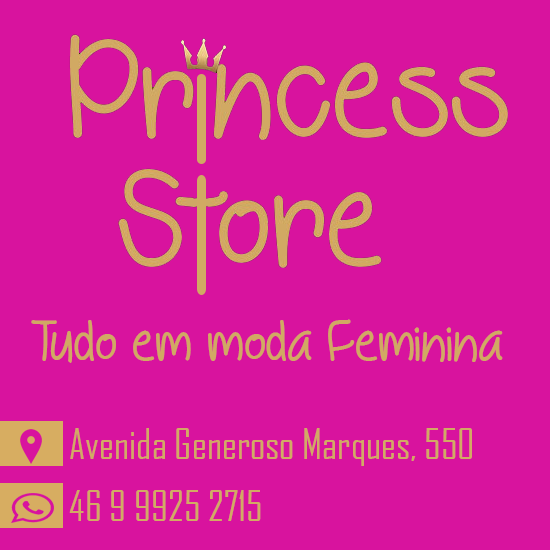
<style>
.page{position:relative;width:550px;height:550px;background:#d8139e}
.page>*{position:absolute;margin:0}
.t1{font:60px "BehindBlueEyes";color:#d1a963}
.t2{font:40px "AgencyFB-Reg";color:#d2aa64}
</style>
<div class="page">
<p class="t1" style="left:31px;top:319px;width:472px;height:44px">Tudo em moda Feminina</p>
<p class="t2" style="left:70px;top:428px;width:402px;height:38px">Avenida Generoso Marques, 550</p>
<p class="t2" style="left:69px;top:490px;width:192px;height:31px">46 9 9925 2715</p>
</div>
